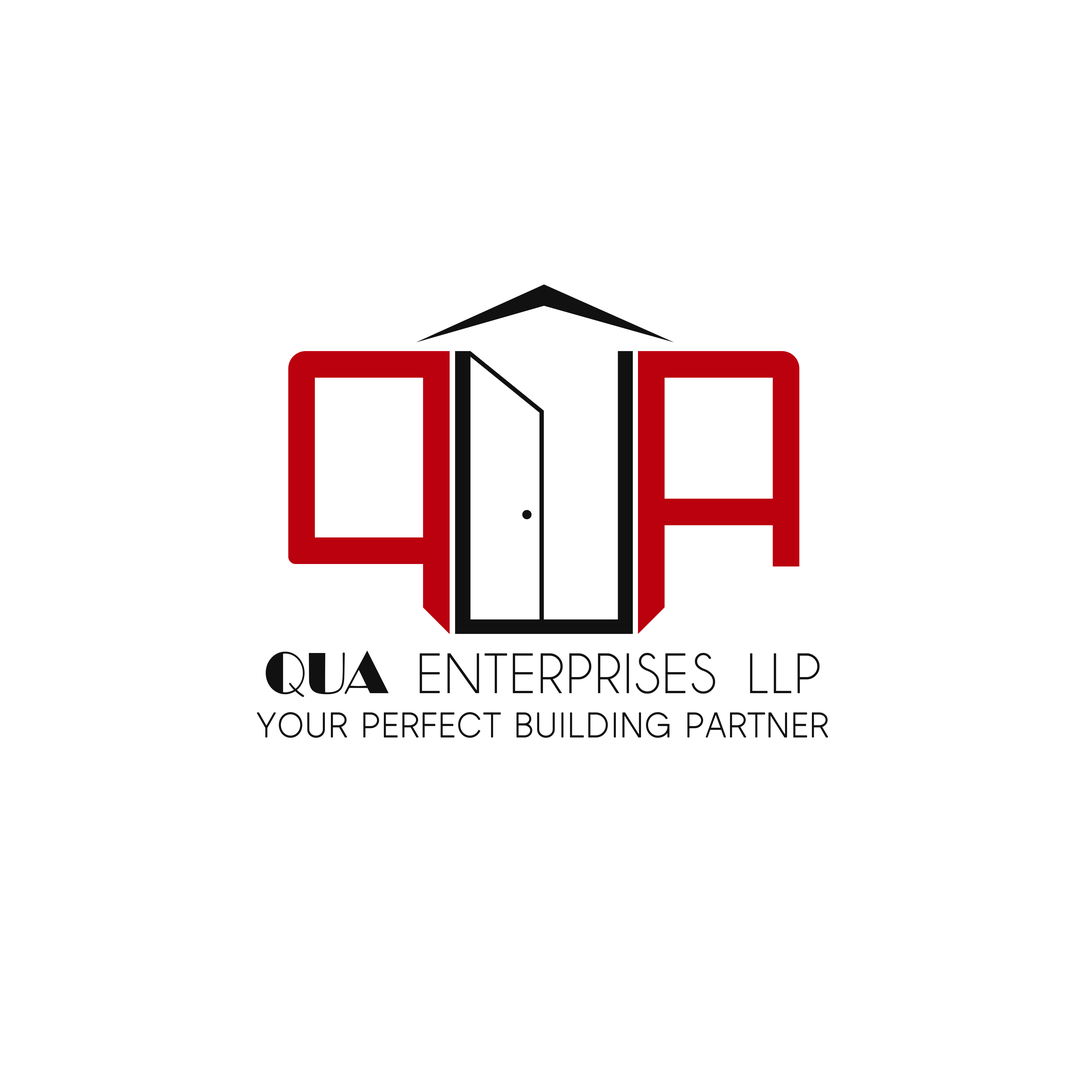
<style>
.page{position:relative;width:1092px;height:1092px;background:#ffffff}
.page>*{position:absolute;margin:0}
.t1{font:57.5px "Champagne&Limousines";letter-spacing:0.03em;color:#111111}
.t2{font:60.4px "Broadway";color:#111111;scale:0.91 1}
.t3{font:27.4px "BlackLabel-Light";color:#111111;font-weight:bold}
</style>
<div class="page">
<p class="t1" style="left:266px;top:650px;width:554px;height:47px"><span class="t2">QUA  </span>ENTERPRISES  LLP</p>
<p class="t3" style="left:257px;top:712px;width:571px;height:26px">YOUR PERFECT BUILDING PARTNER</p>
</div>
